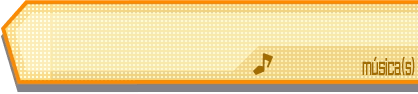
<style>
.page{position:relative;width:418px;height:94px}
.page>*{position:absolute;margin:0}
.t1{font:20px "KafuTechnoStd-E";color:#a16d04;scale:0.48 1}
</style>
<div class="page">
<p class="t1" style="left:362px;top:56px;width:53px;height:20px">música(s)</p>
</div>
